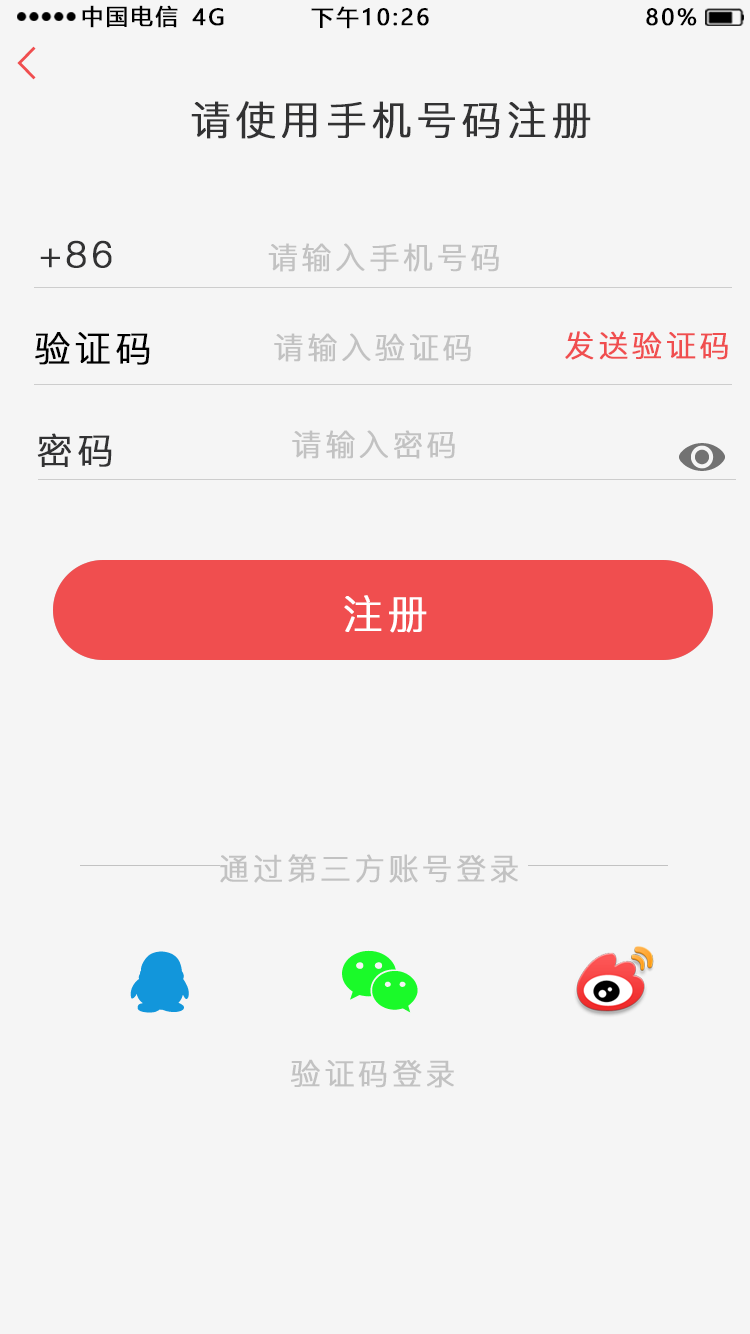
<style>
.page{position:relative;width:750px;height:1334px;background:#f5f5f5}
.page>*{position:absolute;margin:0}
.t1{font:22px "MicrosoftYaHei";letter-spacing:0.1em;color:#000000;text-transform:uppercase;font-weight:bold}
.t2{font:40px "PingFang-SC-Regular";letter-spacing:0.1em;color:#323233;text-transform:uppercase;font-weight:bold}
.t3{font:36px "PingFang-SC-Regular";letter-spacing:0.1em;color:#323233;text-transform:uppercase;font-weight:bold}
.t4{font:30px "PingFang-SC-Regular";letter-spacing:0.1em;color:#c2c2c2;text-transform:uppercase;font-weight:bold}
.t5{font:36px "PingFang-SC-Regular";letter-spacing:0.1em;color:#000000;text-transform:uppercase;font-weight:bold}
.t6{font:30px "PingFang-SC-Regular";letter-spacing:0.1em;color:#f04e4f;text-transform:uppercase;font-weight:bold}
.t7{font:40px "PingFang-SC-Regular";letter-spacing:0.1em;color:#ffffff;text-transform:uppercase;font-weight:bold}
</style>
<div class="page">
<p class="t1" style="left:82px;top:5px;width:96px;height:23px">中国电信</p>
<p class="t1" style="left:311px;top:6px;width:118px;height:23px">下午10:26</p>
<p class="t1" style="left:192px;top:8px;width:32px;height:18px">4G</p>
<p class="t1" style="left:646px;top:8px;width:51px;height:18px">80%</p>
<p class="t2" style="left:191px;top:101px;width:400px;height:38px">请使用手机号码注册</p>
<p class="t3" style="left:40px;top:240px;width:72px;height:28px">+86</p>
<p class="t4" style="left:268px;top:243px;width:231px;height:29px">请输入手机号码</p>
<p class="t5" style="left:35px;top:332px;width:115px;height:33px">验证码</p>
<p class="t4" style="left:274px;top:333px;width:197px;height:29px">请输入验证码</p>
<p class="t6" style="left:565px;top:331px;width:163px;height:29px">发送验证码</p>
<p class="t3" style="left:37px;top:433px;width:75px;height:34px">密码</p>
<p class="t4" style="left:292px;top:430px;width:163px;height:29px">请输入密码</p>
<p class="t7" style="left:344px;top:595px;width:83px;height:38px">注册</p>
<p class="t4" style="left:220px;top:854px;width:298px;height:29px">通过第三方账号登录</p>
<p class="t4" style="left:291px;top:1059px;width:163px;height:29px">验证码登录</p>
</div>
